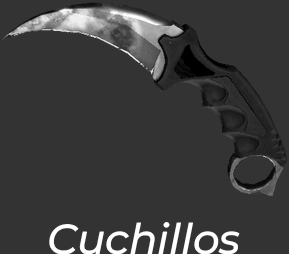
<style>
.page{position:relative;width:289px;height:254px;background:#333333}
.page>*{position:absolute;margin:0}
.t1{font:42px "MontserratItalic-MediumItalic";color:#ffffff}
</style>
<div class="page">
<p class="t1" style="left:49px;top:222px;width:191px;height:33px">Cuchillos</p>
</div>
